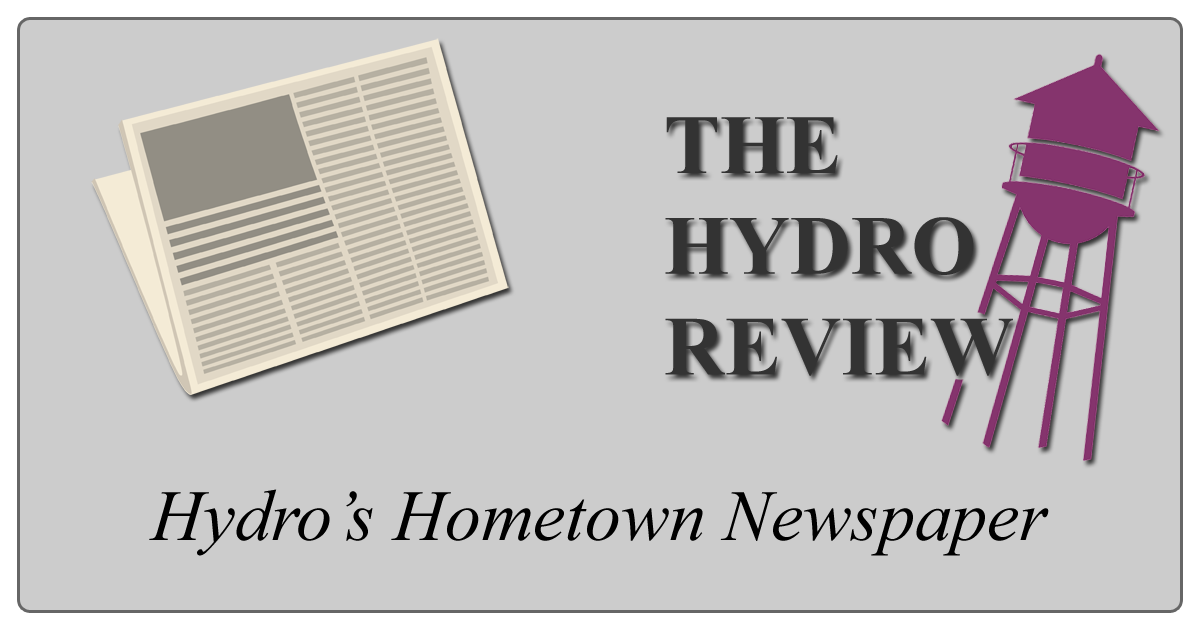
<style>
.page{position:relative;width:1200px;height:630px;background:#cccccc}
.page>*{position:absolute;margin:0}
.t1{font:84px "TimesNewRomanPS-BoldMT";color:#333333}
.t2{font:72px "TimesNewRomanPS-ItalicMT";color:#000000}
</style>
<div class="page">
<p class="t1" style="left:665px;top:117px;width:348px;height:259px">THE <br>HYDRO<br>REVIEW</p>
<p class="t2" style="left:149px;top:489px;width:900px;height:67px">Hydro’s Hometown Newspaper</p>
</div>
